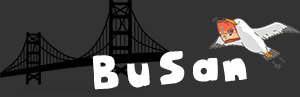
<style>
.page{position:relative;width:300px;height:97px;background:#333333}
.page>*{position:absolute;margin:0}
.t1{font:37.1px "EF_jejudoldam";color:#ffffff}
</style>
<div class="page">
<p class="t1" style="left:92px;top:51px;width:155px;height:39px;rotate:-3deg">BuSan</p>
</div>
